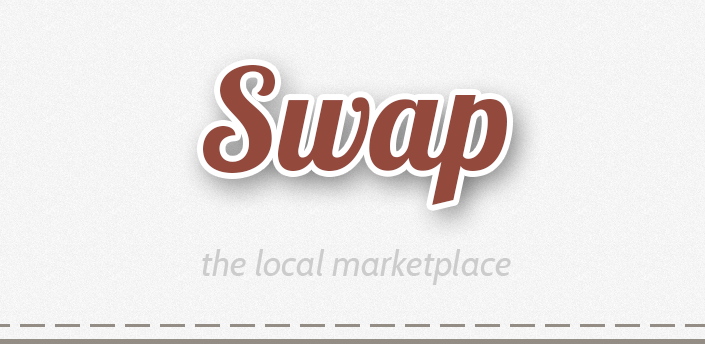
<style>
.page{position:relative;width:705px;height:344px}
.page>*{position:absolute;margin:0}
.t1{font:140px "Lobster1.4";color:#94493d}
.t2{font:36px "Cabin-Italic";color:#cccccc}
</style>
<div class="page">
<p class="t1" style="left:203px;top:65px;width:304px;height:140px">Swap</p>
<p class="t2" style="left:202px;top:249px;width:309px;height:36px">the local marketplace</p>
</div>
